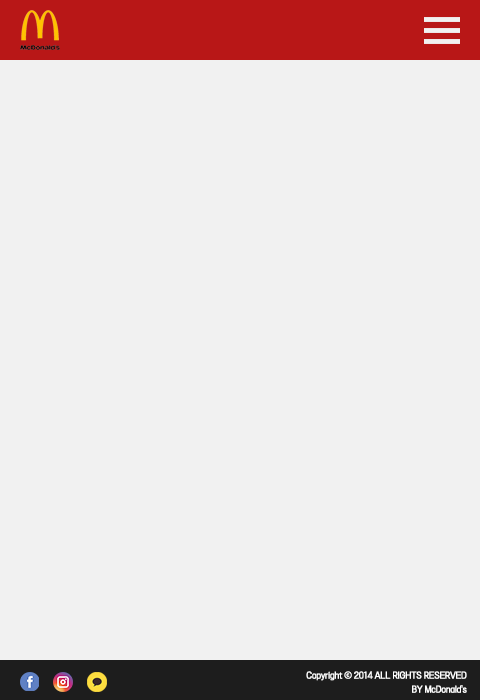
<style>
.page{position:relative;width:480px;height:700px;background:#f1f1f1}
.page>*{position:absolute;margin:0}
.t1{font:8px/14px "TTOmniGothicM";letter-spacing:-0.05em;color:#ffffff;font-weight:bold}
</style>
<div class="page">
<p class="t1" style="left:306px;top:671px;width:161px;height:22px;text-align:right">Copyright ⓒ 2014 ALL RIGHTS RESERVED<br>BY McDonald's</p>
</div>
